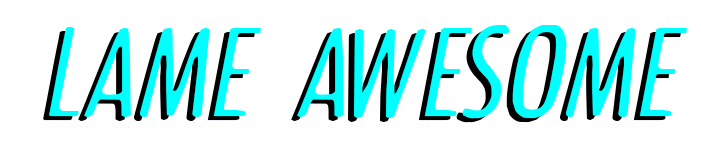
<style>
.page{position:relative;width:701px;height:160px;background:#ffffff}
.page>*{position:absolute;margin:0}
.t1{font:150px "CFOldPhotographCredit-Regular"}
.t2{font:150px "CFOldPhotographCredit-Regular";color:#00ffff}
</style>
<div class="page">
<p class="t1" style="left:43px;top:29px;width:638px;height:94px">LAME AWESOME</p>
<p class="t2" style="left:49px;top:25px;width:638px;height:94px">LAME AWESOME</p>
</div>
